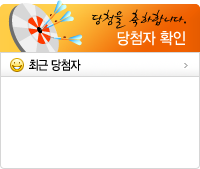
<style>
.page{position:relative;width:200px;height:169px;background:#ffffff}
.page>*{position:absolute;margin:0}
.t1{font:19.1px "SJSoju1";letter-spacing:-0.05em;color:#000000;scale:0.91 1}
.t2{font:15.9px "YDIYGO330";letter-spacing:-0.025em;color:#ffffff;scale:0.91 1}
.t3{font:12.7px "YDIYGO330";letter-spacing:-0.05em;color:#000000;scale:0.87 1}
</style>
<div class="page">
<p class="t1" style="left:92px;top:9px;width:94px;height:20px">당첨을 축하합니다.</p>
<p class="t2" style="left:117px;top:31px;width:68px;height:15px">당첨자 확인</p>
<p class="t3" style="left:29px;top:59px;width:52px;height:12px">최근 당첨자</p>
</div>
